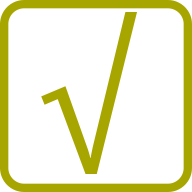
<style>
.page{position:relative;width:192px;height:192px;background:#ffffff}
.page>*{position:absolute;margin:0}
.t1{font:175px "MyriadPro-Regular";color:#a7a600}
</style>
<div class="page">
<p class="t1" style="left:41px;top:12px;width:96px;height:162px">√</p>
</div>
